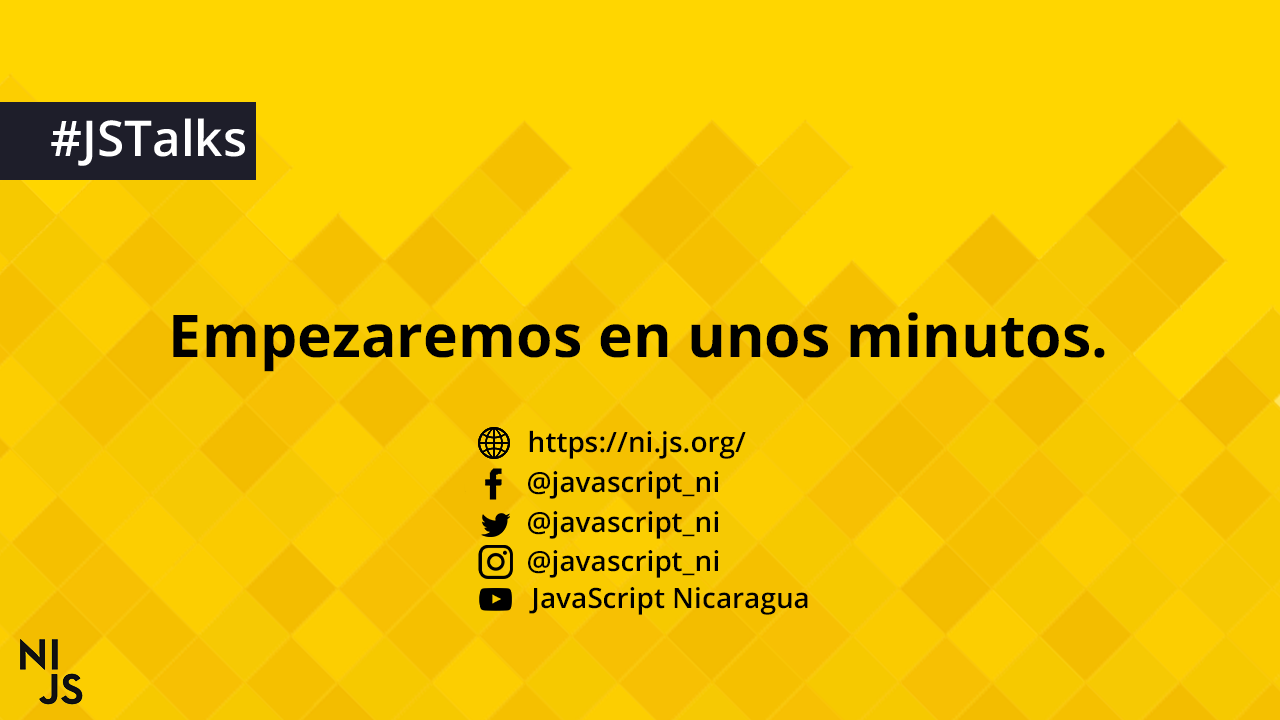
<style>
.page{position:relative;width:1280px;height:720px;background:#ffd600}
.page>*{position:absolute;margin:0}
.t1{font:49.3px "OpenSans-SemiBold";color:#ffffff}
.t2{font:59.1px "OpenSans-Bold";color:#000000}
.t3{font:28px "OpenSans-Semibold";color:#000000}
</style>
<div class="page">
<p class="t1" style="left:51px;top:118px;width:194px;height:48px">#JSTalks</p>
<p class="t2" style="left:173px;top:312px;width:932px;height:60px">Empezaremos en unos minutos.</p>
<p class="t3" style="left:529px;top:430px;width:217px;height:29px">https://ni.js.org/</p>
<p class="t3" style="left:528px;top:471px;width:191px;height:28px">@javascript_ni</p>
<p class="t3" style="left:528px;top:511px;width:191px;height:28px">@javascript_ni</p>
<p class="t3" style="left:528px;top:550px;width:191px;height:28px">@javascript_ni</p>
<p class="t3" style="left:529px;top:587px;width:279px;height:28px">JavaScript Nicaragua</p>
</div>
